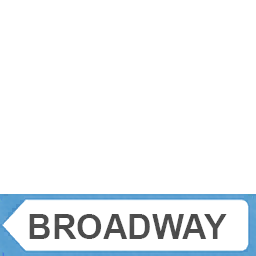
<style>
.page{position:relative;width:256px;height:256px;background:#ffffff}
.page>*{position:absolute;margin:0}
.t1{font:34px "Arial-BoldMT";color:#4d4d4d}
</style>
<div class="page">
<p class="t1" style="left:29px;top:214px;width:198px;height:25px">BROADWAY</p>
</div>
